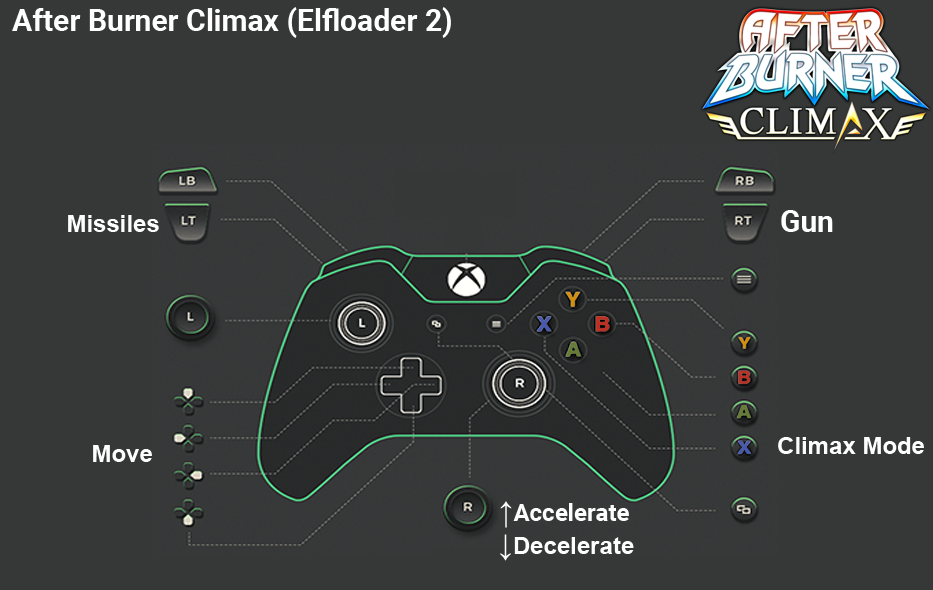
<style>
.page{position:relative;width:933px;height:590px;background:#363838}
.page>*{position:absolute;margin:0}
.t1{font:30px "Roboto-Bold";color:#ffffff}
.t2{font:24px "Arial-BoldMT";color:#fefefe}
.t3{font:24px "Roboto-Bold";color:#fefefe}
.t4{font:30px "ArialMT";color:#fefefe}
.t5{font:30px "Arial-BoldMT";color:#fefefe}
</style>
<div class="page">
<p class="t1" style="left:12px;top:7px;width:439px;height:31px">After Burner Climax (Elfloader 2)</p>
<p class="t2" style="left:68px;top:215px;width:91px;height:17px">Missiles</p>
<p class="t1" style="left:781px;top:210px;width:52px;height:22px">Gun</p>
<p class="t2" style="left:778px;top:437px;width:146px;height:17px">Climax Mode</p>
<p class="t2" style="left:93px;top:445px;width:59px;height:17px">Move</p>
<p class="t3" style="left:500px;top:501px;width:129px;height:27px"><span class="t4">↑</span>Accelerate</p>
<p class="t2" style="left:500px;top:534px;width:134px;height:27px"><span class="t5">↓</span>Decelerate</p>
</div>
